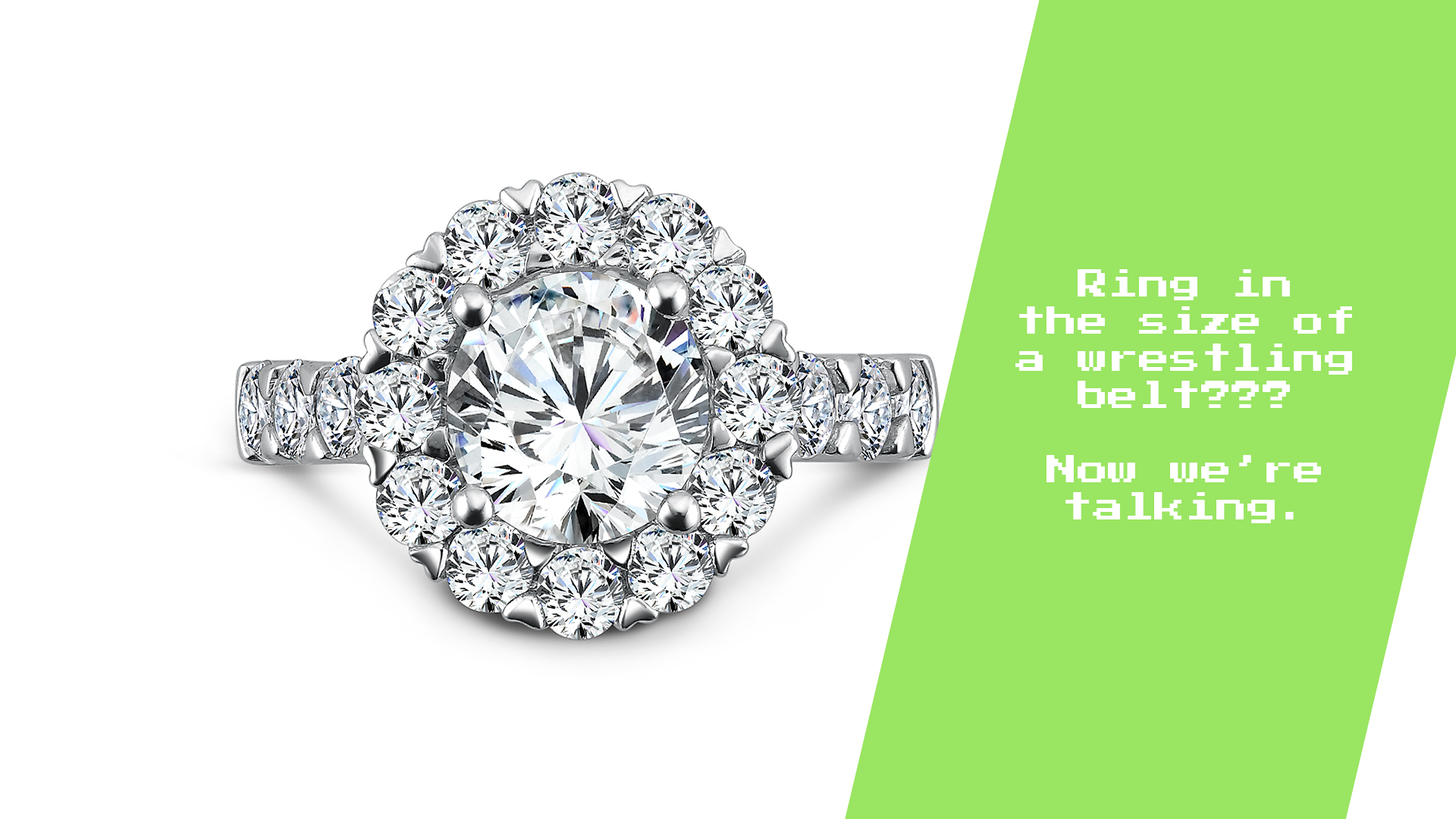
<style>
.page{position:relative;width:1456px;height:819px;background:#ffffff}
.page>*{position:absolute;margin:0}
.t1{font:31.1px "PressStart2P-Regular";letter-spacing:-0.005em;color:#ffffff}
</style>
<div class="page">
<p class="t1" style="left:1015px;top:269px;width:337px;height:254px;text-align:center">Ring in<br>the size of <br>a wrestling<br>belt???<br><br>Now we’re<br>talking.</p>
</div>
